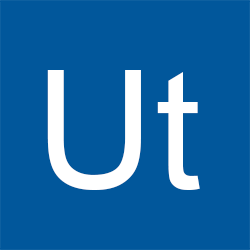
<style>
.page{position:relative;width:250px;height:250px;background:#01579b}
.page>*{position:absolute;margin:0}
.t1{font:165.5px "ArialMT";color:#ffffff}
</style>
<div class="page">
<p class="t1" style="left:47px;top:70px;width:153px;height:120px">Ut</p>
</div>
